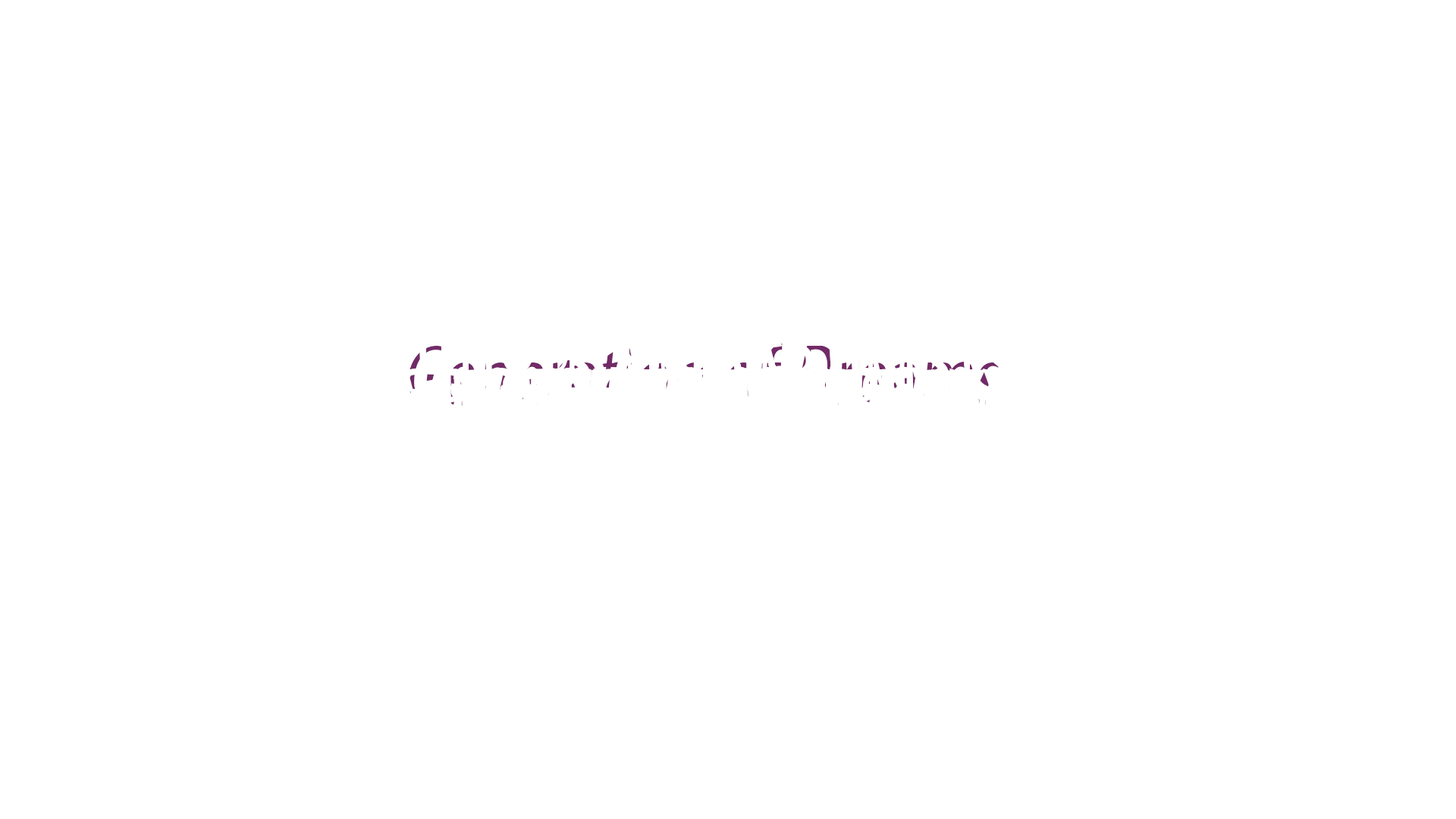
<style>
.page{position:relative;width:1456px;height:819px;background:#ffffff}
.page>*{position:absolute;margin:0}
.t1{font:85.9px "MyriadStd-Tilt";color:#ffffff;font-style:italic}
</style>
<div class="page">
<p class="t1" style="left:407px;top:344px;width:594px;height:62px">Generation of Dreams</p>
</div>
